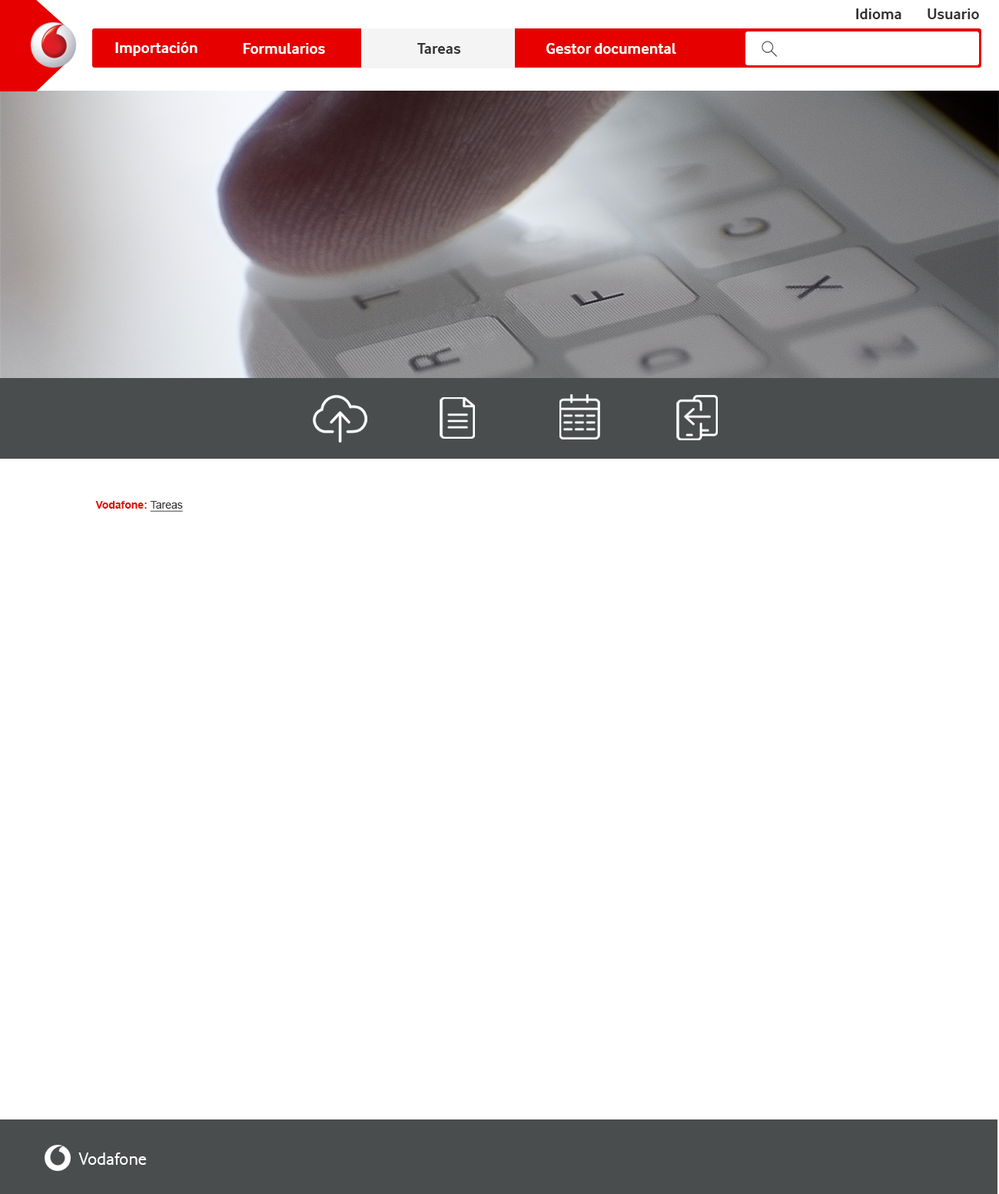
<style>
.page{position:relative;width:999px;height:1194px;background:#ffffff}
.page>*{position:absolute;margin:0}
.t1{font:16.1px "VodafoneRg-Bold";color:#333333}
.t2{font:16.1px "VodafoneRg-Bold";color:#ffffff}
.t3{font:10.8px "Arial-BoldMT";color:#e60000}
.t4{font:10.8px "ArialMT";color:#333333;text-decoration:underline}
.t5{font:18.4px "VodafoneRg-Regular";color:#ffffff}
</style>
<div class="page">
<p class="t1" style="left:856px;top:8px;width:45px;height:11px">Idioma</p>
<p class="t1" style="left:927px;top:8px;width:52px;height:11px">Usuario</p>
<p class="t2" style="left:115px;top:41px;width:82px;height:15px">Importación</p>
<p class="t2" style="left:244px;top:43px;width:81px;height:11px">Formularios</p>
<p class="t1" style="left:417px;top:43px;width:44px;height:11px">Tareas</p>
<p class="t2" style="left:546px;top:43px;width:130px;height:11px">Gestor documental</p>
<p class="t3" style="left:95px;top:501px;width:88px;height:11px">Vodafone: <span class="t4">Tareas</span></p>
<p class="t5" style="left:78px;top:1152px;width:69px;height:13px">Vodafone</p>
</div>
